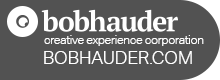
<style>
.page{position:relative;width:220px;height:80px;background:#525252}
.page>*{position:absolute;margin:0}
.t1{font:12px "AktivGroteskCorp-Light";letter-spacing:-0.025em;color:#ffffff}
.t2{font:18px "AktivGroteskCorp-Light";color:#ffffff}
</style>
<div class="page">
<p class="t1" style="left:44px;top:35px;width:160px;height:11px">creative experience corporation</p>
<p class="t2" style="left:44px;top:51px;width:148px;height:13px">BOBHAUDER.COM</p>
</div>
